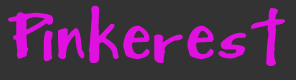
<style>
.page{position:relative;width:296px;height:80px;background:#333333}
.page>*{position:absolute;margin:0}
.t1{font:72px "MightytoSave";color:#e010e0}
</style>
<div class="page">
<p class="t1" style="left:8px;top:5px;width:277px;height:61px">Pinkerest</p>
</div>
